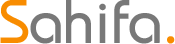
<style>
.page{position:relative;width:175px;height:44px;background:#ffffff}
.page>*{position:absolute;margin:0}
.t1{font:61.3px "BiminiNormal";color:#787878}
.t2{font:61.3px "BiminiNormal";color:#f88c00}
</style>
<div class="page">
<p class="t1" style="left:0px;top:0px;width:175px;height:44px"><span class="t2">S</span>ahifa<span class="t2">.</span></p>
</div>
